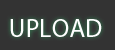
<style>
.page{position:relative;width:115px;height:50px;background:#333333}
.page>*{position:absolute;margin:0}
.t1{font:26px "MyriadPro-Regular";color:#ffffff;text-transform:uppercase}
</style>
<div class="page">
<p class="t1" style="left:10px;top:19px;width:92px;height:18px">UPLOAD</p>
</div>
